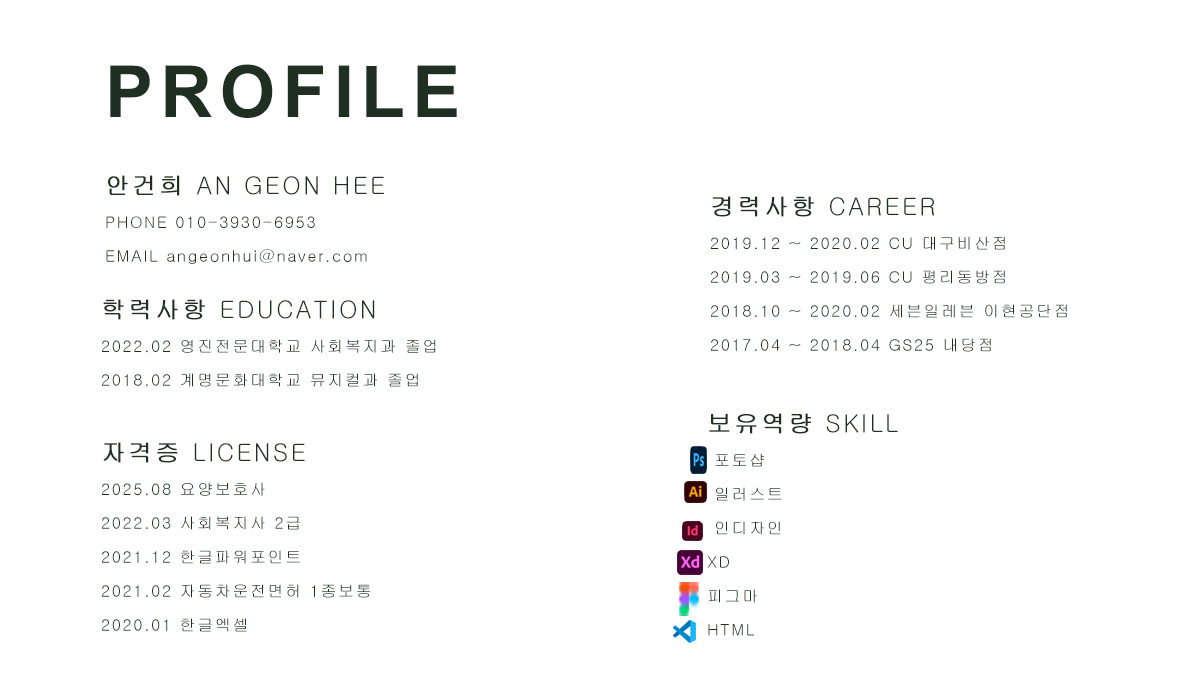
<style>
.page{position:relative;width:1200px;height:675px;background:#ffffff}
.page>*{position:absolute;margin:0}
.t1{font:72px "Arial-BoldMT";letter-spacing:0.1em;color:#1f3022}
.t2{font:16px/17px "Gulim";letter-spacing:0.1em;color:#1f3022}
.t3{font:24px/17px "Gulim";letter-spacing:0.1em;color:#1f3022;font-weight:bold}
.t4{font:24px/17px "Gulim";letter-spacing:0.1em;color:#1f3022}
</style>
<div class="page">
<p class="t1" style="left:110px;top:64px;width:347px;height:54px">PROFILE</p>
<p class="t2" style="left:106px;top:175px;width:278px;height:89px"><span class="t3">안건희</span><span class="t4"> AN GEON HEE<br><br></span>PHONE 010-3930-6953<br><br>EMAIL angeonhui@naver.com</p>
<p class="t2" style="left:711px;top:196px;width:356px;height:156px"><span class="t3">경력사항</span><span class="t4"> CAREER<br><br></span>2019.12 ~ 2020.02 CU 대구비산점<br><br>2019.03 ~ 2019.06 CU 평리동방점<br><br>2018.10 ~ 2020.02 세븐일레븐 이현공단점<br><br>2017.04 ~ 2018.04 GS25 내당점</p>
<p class="t2" style="left:102px;top:299px;width:334px;height:88px"><span class="t3">학력사항</span><span class="t4"> EDUCATION<br><br></span>2022.02 영진전문대학교 사회복지과 졸업<br><br>2018.02 계명문화대학교 뮤지컬과 졸업</p>
<p class="t2" style="left:707px;top:413px;width:191px;height:223px"><span class="t3">보유역량</span><span class="t4"> SKILL<br><br></span> 포토샵<br><br> 일러스트<br><br> 인디자인<br><br>XD<br><br>피그마<br><br>HTML</p>
<p class="t2" style="left:102px;top:442px;width:269px;height:190px"><span class="t3">자격증</span><span class="t4"> LICENSE<br><br></span>2025.08 요양보호사<br><br>2022.03 사회복지사 2급<br><br>2021.12 한글파워포인트<br><br>2021.02 자동차운전면허 1종보통<br><br>2020.01 한글엑셀</p>
</div>
